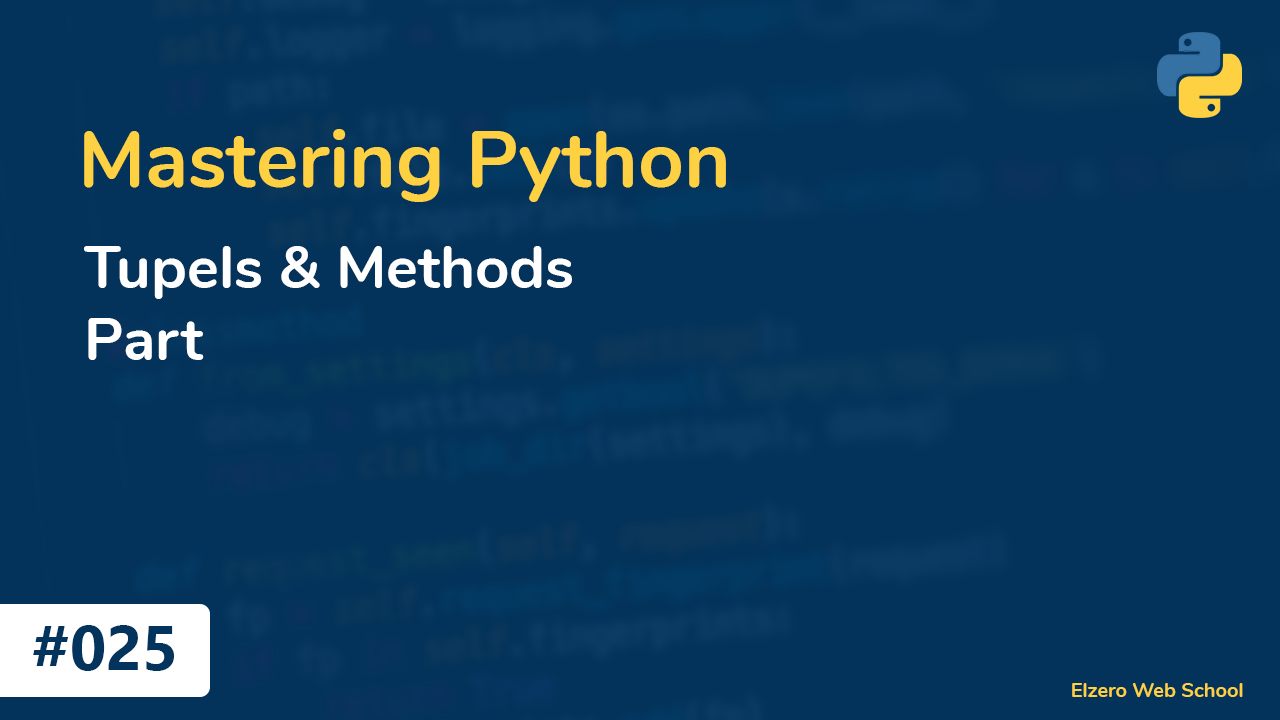
<style>
.page{position:relative;width:1280px;height:720px;background:#03325a}
.page>*{position:absolute;margin:0}
.t1{font:80px "Nunito-Bold";color:#fed142}
.t2{font:60px "Nunito-Bold";color:#ffffff}
.t3{font:62.8px "Gadugi-Bold";color:#02345e}
.t4{font:20px "Nunito-Bold";color:#fed142}
</style>
<div class="page">
<p class="t1" style="left:84px;top:129px;width:642px;height:73px">Mastering Python</p>
<p class="t2" style="left:84px;top:246px;width:488px;height:114px;text-align:right">Tupels &amp; Methods<br>Part</p>
<p class="t3" style="left:33px;top:625px;width:141px;height:46px">025#</p>
<p class="t4" style="left:1072px;top:683px;width:171px;height:14px">Elzero Web School</p>
</div>
